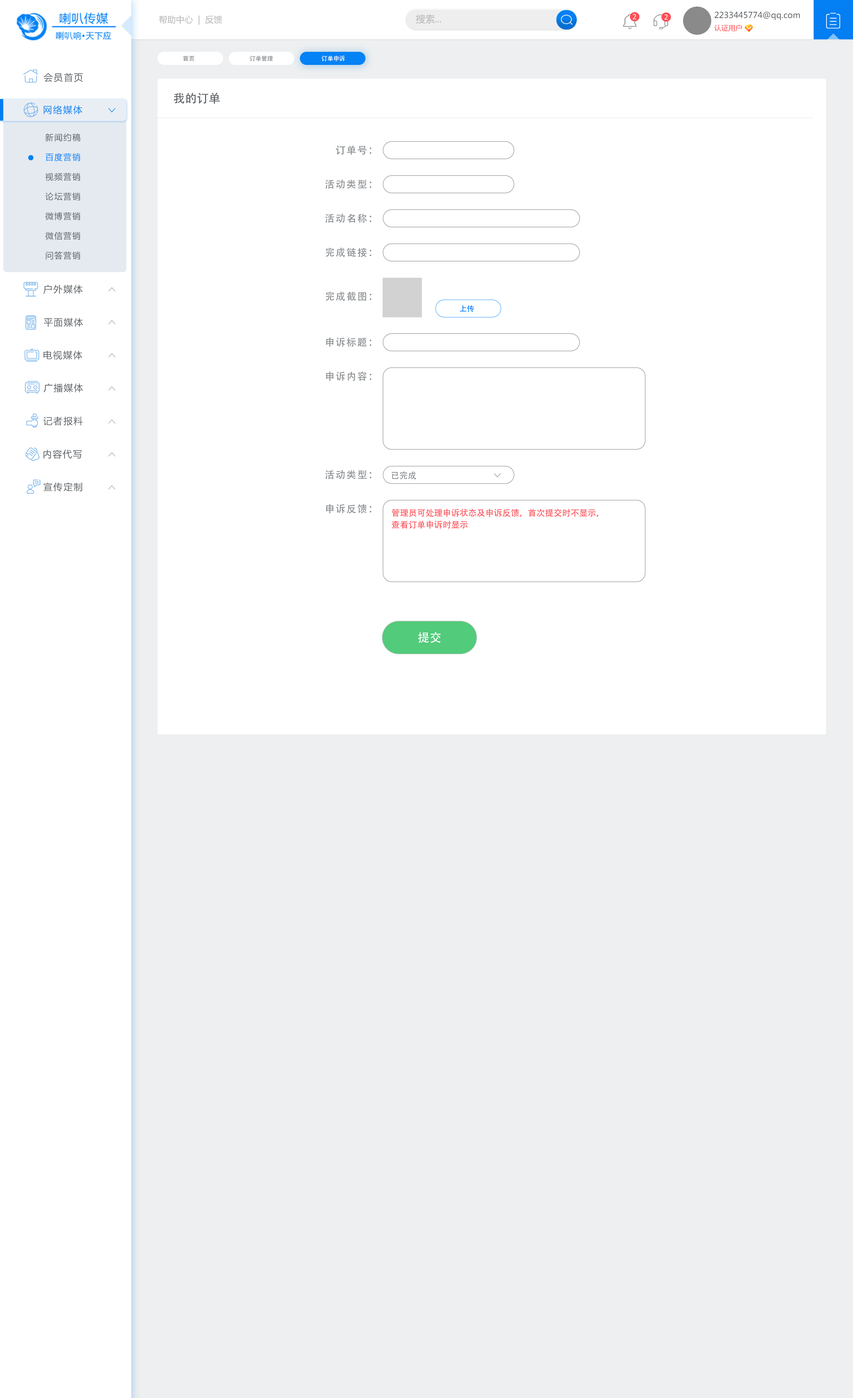
<style>
.page{position:relative;width:853px;height:1398px;background:#ffffff}
.page>*{position:absolute;margin:0}
.t1{font:8.6px "MicrosoftYaHei";color:#b4b4b4}
.t2{font:9.4px "MicrosoftYaHei";color:#b4b4b4}
.t3{font:6.9px "Tahoma";letter-spacing:0.1em;color:#ffffff;text-transform:uppercase}
.t4{font:8.2px/12.3px "MicrosoftYaHei";color:#5c6165}
.t5{font:7.1px/12.3px "MicrosoftYaHei";color:#fe4d55}
.t6{font:5.9px "AdobeHeitiStd-Regular";color:#878b8e}
.t7{font:5.9px "AdobeHeitiStd-Regular";color:#fefefe}
.t8{font:9.2px "MicrosoftYaHei";letter-spacing:0.1em;color:#5c6165}
.t9{font:11.8px "AdobeHeitiStd-Regular";color:#5c6165}
.t10{font:9.2px "MicrosoftYaHei";letter-spacing:0.1em;color:#0582f5}
.t11{font:8.2px/19.7px "MicrosoftYaHei";letter-spacing:0.1em;color:#5c6165}
.t12{font:8.2px/19.7px "MicrosoftYaHei";letter-spacing:0.1em;color:#0381f5}
.t13{font:9.8px "AdobeHeitiStd-Regular";letter-spacing:0.1em;color:#878b8e}
.t14{font:7.4px "AdobeHeitiStd-Regular";color:#0582f5}
.t15{font:8.5px "AdobeHeitiStd-Regular";color:#878b8e}
.t16{font:8.5px/11.8px "AdobeHeitiStd-Regular";color:#fe4d55}
.t17{font:11.8px "AdobeHeitiStd-Regular";color:#fefefe}
</style>
<div class="page">
<p class="t1" style="left:159px;top:15px;width:63px;height:10px">帮助中心  |  反馈</p>
<p class="t2" style="left:416px;top:14px;width:25px;height:10px">搜索...</p>
<p class="t3" style="left:633px;top:14px;width:3px;height:5px">2</p>
<p class="t3" style="left:664px;top:14px;width:4px;height:6px">2</p>
<p class="t4" style="left:714px;top:11px;width:86px;height:20px">2233445774@qq.com<br><span class="t5">认证用户</span></p>
<p class="t6" style="left:183px;top:55px;width:11px;height:6px">首页</p>
<p class="t6" style="left:250px;top:55px;width:23px;height:6px">订单管理</p>
<p class="t7" style="left:321px;top:55px;width:24px;height:6px">订单申诉</p>
<p class="t8" style="left:44px;top:73px;width:39px;height:9px">会员首页</p>
<p class="t9" style="left:173px;top:92px;width:47px;height:12px">我的订单</p>
<p class="t10" style="left:44px;top:105px;width:38px;height:9px">网络媒体</p>
<p class="t11" style="left:45px;top:133px;width:35px;height:127px">新闻约稿<br><span class="t12">百度营销<br></span>视频营销<br>论坛营销<br>微博营销<br>微信营销<br>问答营销</p>
<p class="t13" style="left:336px;top:146px;width:35px;height:9px">订单号：</p>
<p class="t13" style="left:325px;top:179px;width:46px;height:10px">活动类型：</p>
<p class="t13" style="left:325px;top:214px;width:46px;height:9px">活动名称：</p>
<p class="t13" style="left:326px;top:248px;width:45px;height:9px">完成链接：</p>
<p class="t8" style="left:43px;top:285px;width:40px;height:9px">户外媒体</p>
<p class="t13" style="left:326px;top:292px;width:45px;height:9px">完成截图：</p>
<p class="t14" style="left:459px;top:305px;width:15px;height:7px">上传</p>
<p class="t8" style="left:44px;top:318px;width:39px;height:9px">平面媒体</p>
<p class="t13" style="left:326px;top:337px;width:45px;height:10px">申诉标题：</p>
<p class="t8" style="left:43px;top:351px;width:39px;height:9px">电视媒体</p>
<p class="t13" style="left:326px;top:372px;width:45px;height:9px">申诉内容：</p>
<p class="t8" style="left:44px;top:383px;width:39px;height:10px">广播媒体</p>
<p class="t8" style="left:43px;top:417px;width:40px;height:9px">记者报料</p>
<p class="t8" style="left:43px;top:450px;width:39px;height:9px">内容代写</p>
<p class="t13" style="left:325px;top:470px;width:46px;height:9px">活动类型：</p>
<p class="t15" style="left:392px;top:471px;width:24px;height:9px">已完成</p>
<p class="t8" style="left:43px;top:482px;width:39px;height:10px">宣传定制</p>
<p class="t13" style="left:326px;top:504px;width:45px;height:10px">申诉反馈：</p>
<p class="t16" style="left:392px;top:509px;width:206px;height:20px">管理员可处理申诉状态及申诉反馈，首次提交时不显示，<br>查看订单申诉时显示</p>
<p class="t17" style="left:418px;top:632px;width:22px;height:11px">提交</p>
</div>
